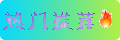
<style>
.page{position:relative;width:120px;height:40px}
.page>*{position:absolute;margin:0}
.t1{font:24px "HYk5gj"}
</style>
<div class="page">
<p class="t1" style="left:3px;top:12px;width:92px;height:18px">热门推荐</p>
</div>
